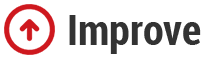
<style>
.page{position:relative;width:220px;height:60px;background:#ffffff}
.page>*{position:absolute;margin:0}
.t1{font:42px "Roboto-BoldCondensed";color:#333333}
</style>
<div class="page">
<p class="t1" style="left:69px;top:15px;width:132px;height:39px">Improve</p>
</div>
